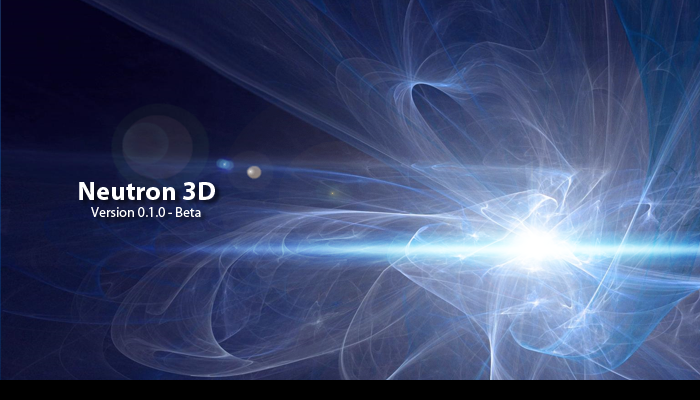
<style>
.page{position:relative;width:700px;height:400px}
.page>*{position:absolute;margin:0}
.t1{font:14px "MyriadPro-Regular";color:#ffffff}
.t2{font:26.8px "MyriadPro-Bold";color:#ffffff}
</style>
<div class="page">
<p class="t1" style="left:79px;top:182px;width:136px;height:35px;text-align:center"><span class="t2">Neutron 3D<br></span>Version 0.1.0 - Beta</p>
</div>
